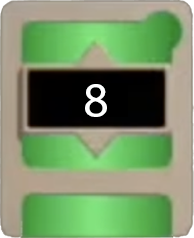
<style>
.page{position:relative;width:194px;height:238px}
.page>*{position:absolute;margin:0}
.t1{font:50px "MyriadPro-Regular";color:#ffffff}
</style>
<div class="page">
<p class="t1" style="left:85px;top:84px;width:22px;height:33px">8</p>
</div>
